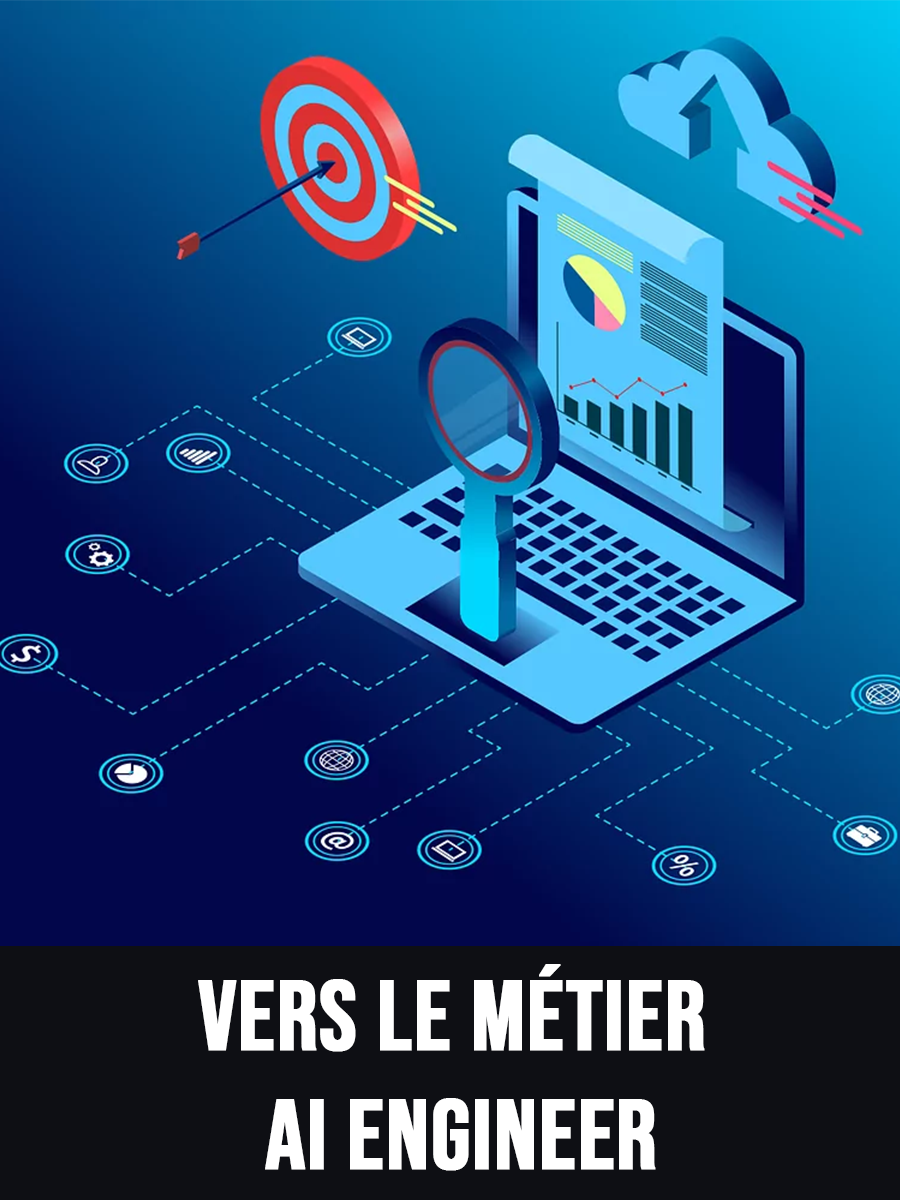
<style>
.page{position:relative;width:900px;height:1200px}
.page>*{position:absolute;margin:0}
.t1{font:99px "BebasNeue-Regular";color:#ffffff;font-weight:bold}
</style>
<div class="page">
<p class="t1" style="left:198px;top:964px;width:507px;height:207px;text-align:center">Vers le métier <br>AI engineer</p>
</div>
